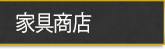
<style>
.page{position:relative;width:165px;height:49px}
.page>*{position:absolute;margin:0}
.t1{font:22px "GothicMB101Pr6N-Light";letter-spacing:-0.02em;color:#fbfbf9;scale:0.9 1}
</style>
<div class="page">
<p class="t1" style="left:16px;top:12px;width:76px;height:21px">家具商店</p>
</div>
